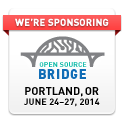
<style>
.page{position:relative;width:125px;height:125px;background:#ffffff}
.page>*{position:absolute;margin:0}
.t1{font:10px "DIN-Black";color:#ffffff}
.t2{font:7px "DINPro-Bold";letter-spacing:0.02em;color:#08b9a6}
.t3{font:13px "DINPro-Black";letter-spacing:0.06em;color:#116db6}
.t4{font:13px "DINPro-Black";letter-spacing:0.02em;color:#116db6}
.t5{font:13px "DINPro-Black";letter-spacing:0.03em;color:#116db6}
.t6{font:9px/10px "DIN-Bold";letter-spacing:0.02em;color:#000000}
.t7{font:11px/10px "DIN-Bold";color:#000000}
</style>
<div class="page">
<p class="t1" style="left:15px;top:18px;width:94px;height:8px">WE’RE SPONSORING</p>
<p class="t2" style="left:39px;top:62px;width:48px;height:5px">OPEN SOURCE</p>
<p class="t3" style="left:39px;top:69px;width:47px;height:10px"><span class="t4">B</span>RI<span class="t5">D</span><span class="t4">GE</span></p>
<p class="t6" style="left:24px;top:87px;width:76px;height:20px;text-align:center"><span class="t7">PORTLAND, OR<br></span>JUNE 24–27, 2014</p>
</div>
